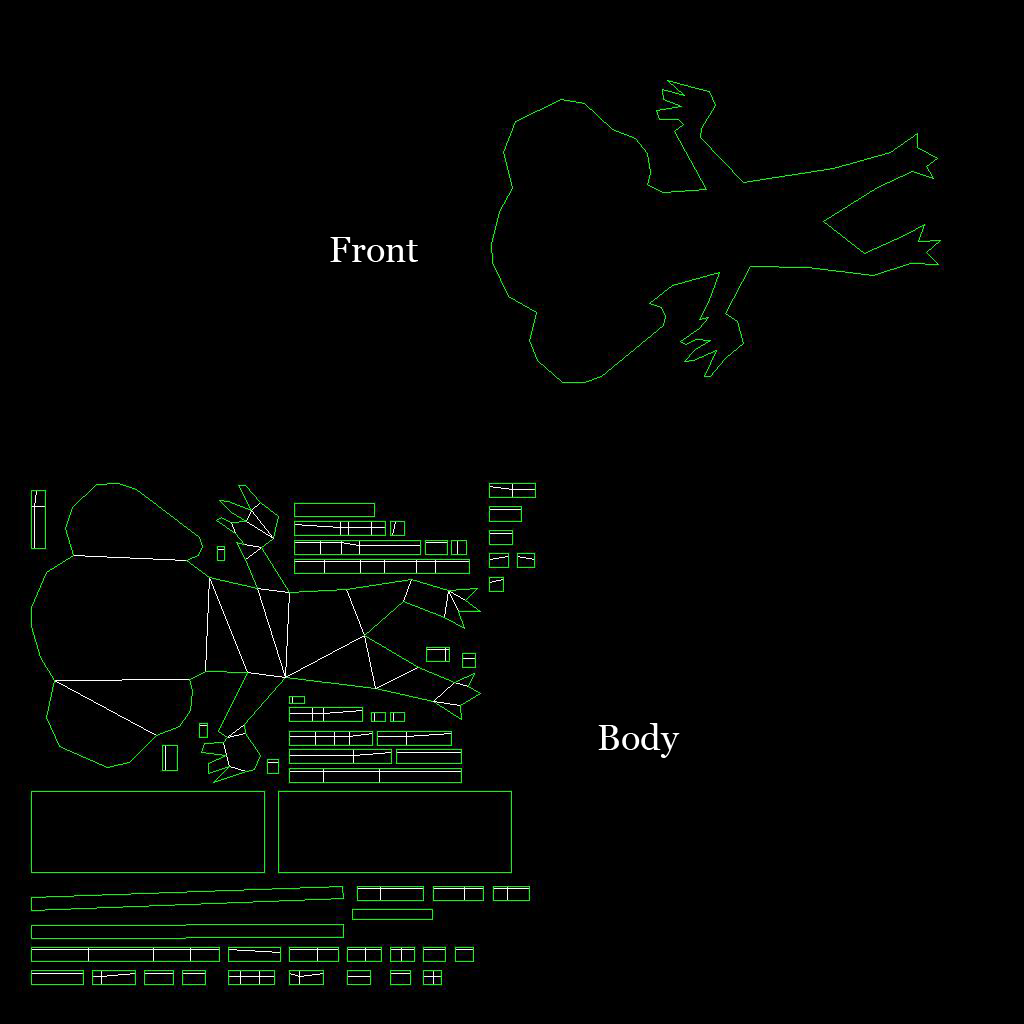
<style>
.page{position:relative;width:1024px;height:1024px;background:#000000}
.page>*{position:absolute;margin:0}
.t1{font:36px "Georgia";color:#ffffff}
</style>
<div class="page">
<p class="t1" style="left:330px;top:237px;width:88px;height:25px">Front</p>
<p class="t1" style="left:598px;top:723px;width:82px;height:35px">Body</p>
</div>
